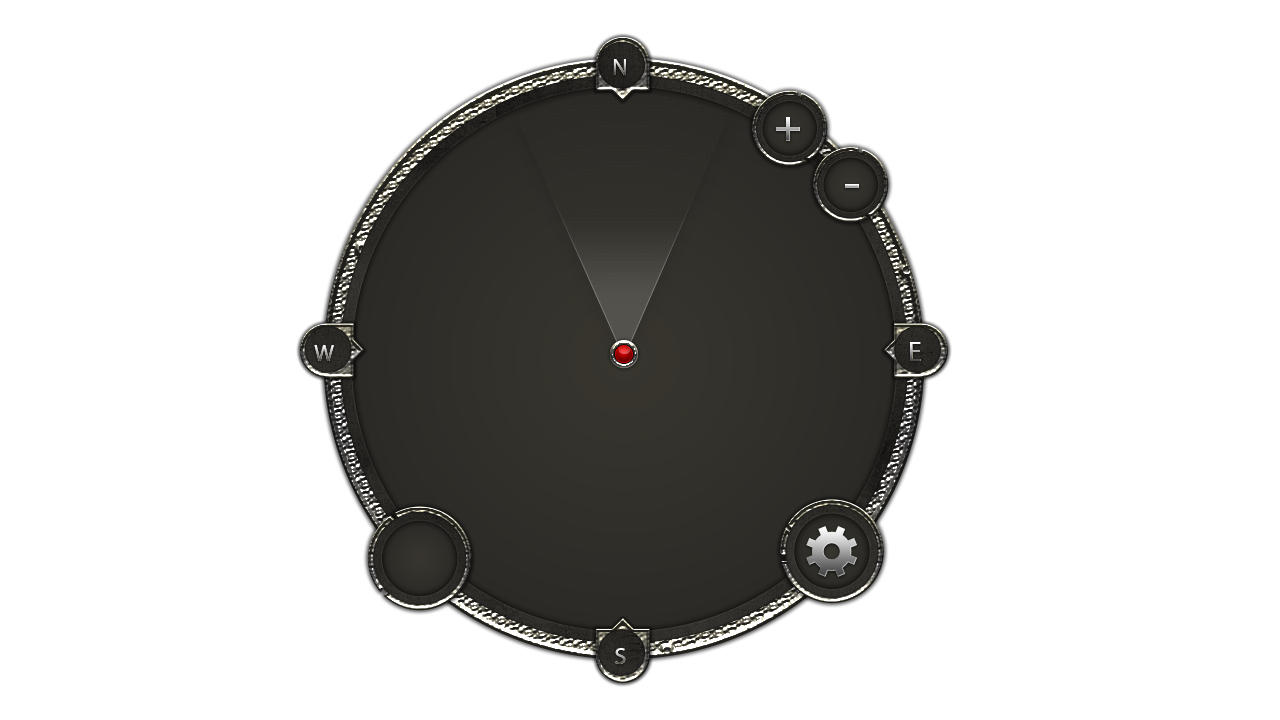
<style>
.page{position:relative;width:1280px;height:720px;background:#ffffff}
.page>*{position:absolute;margin:0}
.t1{font:23.5px "MyriadPro-Regular"}
.t2{font:51.7px "ArialMT"}
.t3{font:28.2px "MyriadPro-Regular"}
</style>
<div class="page">
<p class="t1" style="left:613px;top:59px;width:13px;height:16px">N</p>
<p class="t2" style="left:776px;top:117px;width:24px;height:24px">+</p>
<p class="t3" style="left:910px;top:342px;width:11px;height:19px">E</p>
<p class="t1" style="left:314px;top:345px;width:20px;height:16px">W</p>
<p class="t1" style="left:615px;top:648px;width:11px;height:16px">S</p>
</div>
